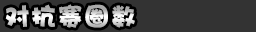
<style>
.page{position:relative;width:256px;height:32px;background:#333333}
.page>*{position:absolute;margin:0}
.t1{font:25.3px "DFPHaiBaoW12";letter-spacing:0.05em}
</style>
<div class="page">
<p class="t1" style="left:5px;top:4px;width:130px;height:24px">对抗赛圈数</p>
</div>
